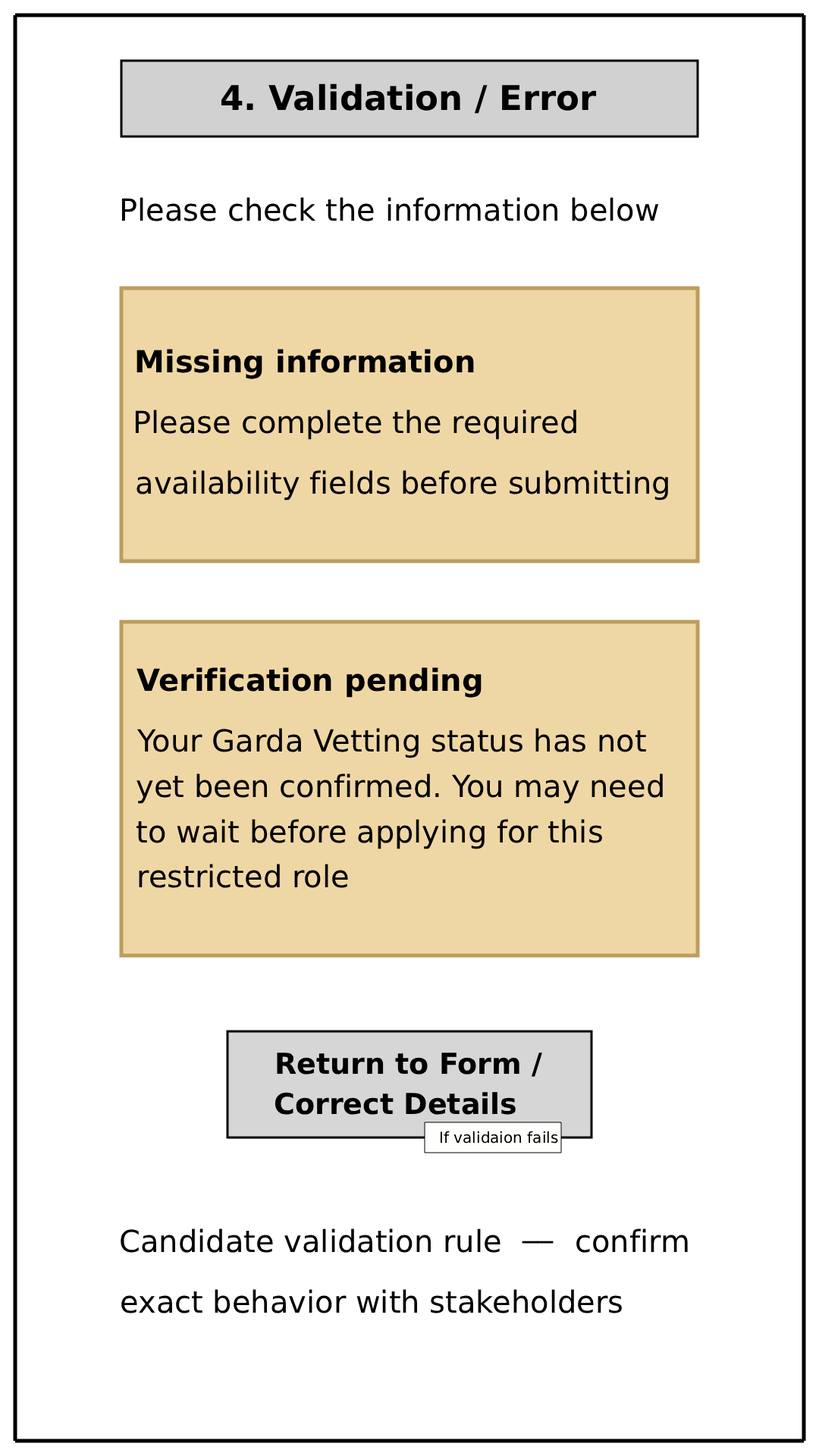
<style>
.page{position:relative;width:819px;height:1456px;background:#ffffff}
.page>*{position:absolute;margin:0}
.t1{font:34.1px "DejaVuSans-Bold";color:#000000}
.t2{font:30.3px "DejaVuSans";color:#000000}
.t3{font:30.3px "DejaVuSans-Bold";color:#000000}
.t4{font:28.8px "DejaVuSans-Bold";color:#000000}
.t5{font:15.2px "DejaVuSans";color:#000000}
</style>
<div class="page">
<p class="t1" style="left:221px;top:83px;width:376px;height:31px">4. Validation / Error</p>
<p class="t2" style="left:121px;top:197px;width:538px;height:24px">Please check the information below</p>
<p class="t3" style="left:136px;top:349px;width:338px;height:30px">Missing information</p>
<p class="t2" style="left:135px;top:409px;width:441px;height:31px">Please complete the required</p>
<p class="t2" style="left:136px;top:470px;width:532px;height:30px">availability fields before submitting</p>
<p class="t3" style="left:136px;top:667px;width:346px;height:31px">Verification pending</p>
<p class="t2" style="left:136px;top:728px;width:510px;height:30px">Your Garda Vetting status has not</p>
<p class="t2" style="left:136px;top:773px;width:527px;height:31px">yet been confirmed. You may need</p>
<p class="t2" style="left:136px;top:819px;width:466px;height:30px">to wait before applying for this</p>
<p class="t2" style="left:139px;top:864px;width:209px;height:24px">restricted role</p>
<p class="t4" style="left:277px;top:1053px;width:265px;height:24px">Return to Form /</p>
<p class="t4" style="left:275px;top:1092px;width:241px;height:23px">Correct Details</p>
<p class="t5" style="left:440px;top:1131px;width:118px;height:13px">If validaion fails</p>
<p class="t2" style="left:121px;top:1228px;width:379px;height:25px">Candidate validation rule</p>
<p class="t2" style="left:576px;top:1228px;width:112px;height:25px">confirm</p>
<p class="t2" style="left:522px;top:1241px;width:32px;height:3px">__</p>
<p class="t2" style="left:121px;top:1289px;width:501px;height:24px">exact behavior with stakeholders</p>
</div>
